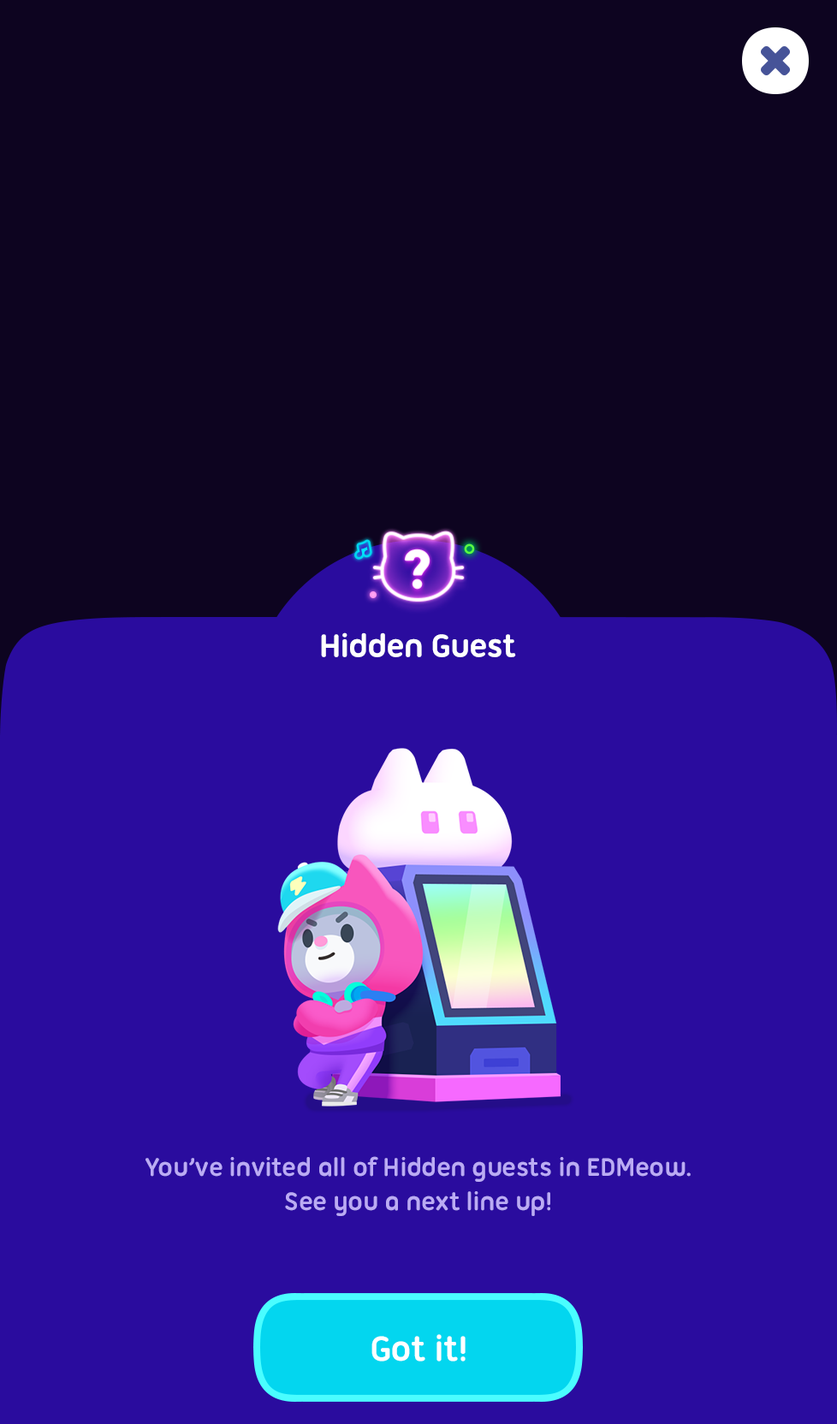
<style>
.page{position:relative;width:837px;height:1424px;background:#2a0c9e}
.page>*{position:absolute;margin:0}
.t1{font:34.2px "UbuntuTitling-Bold";letter-spacing:-0.025em;color:#ffffff}
.t2{font:27.4px/34.2px "UbuntuTitling-Bold";letter-spacing:-0.025em;color:#bbabf4}
.t3{font:37.7px "UbuntuTitling-Bold";letter-spacing:-0.025em;color:#ffffff}
</style>
<div class="page">
<p class="t1" style="left:321px;top:633px;width:195px;height:24px">Hidden Guest</p>
<p class="t2" style="left:146px;top:1156px;width:545px;height:60px;text-align:center">You’ve invited all of Hidden guests in EDMeow.<br>See you a next line up!</p>
<p class="t3" style="left:372px;top:1334px;width:94px;height:28px">Got it!</p>
</div>
